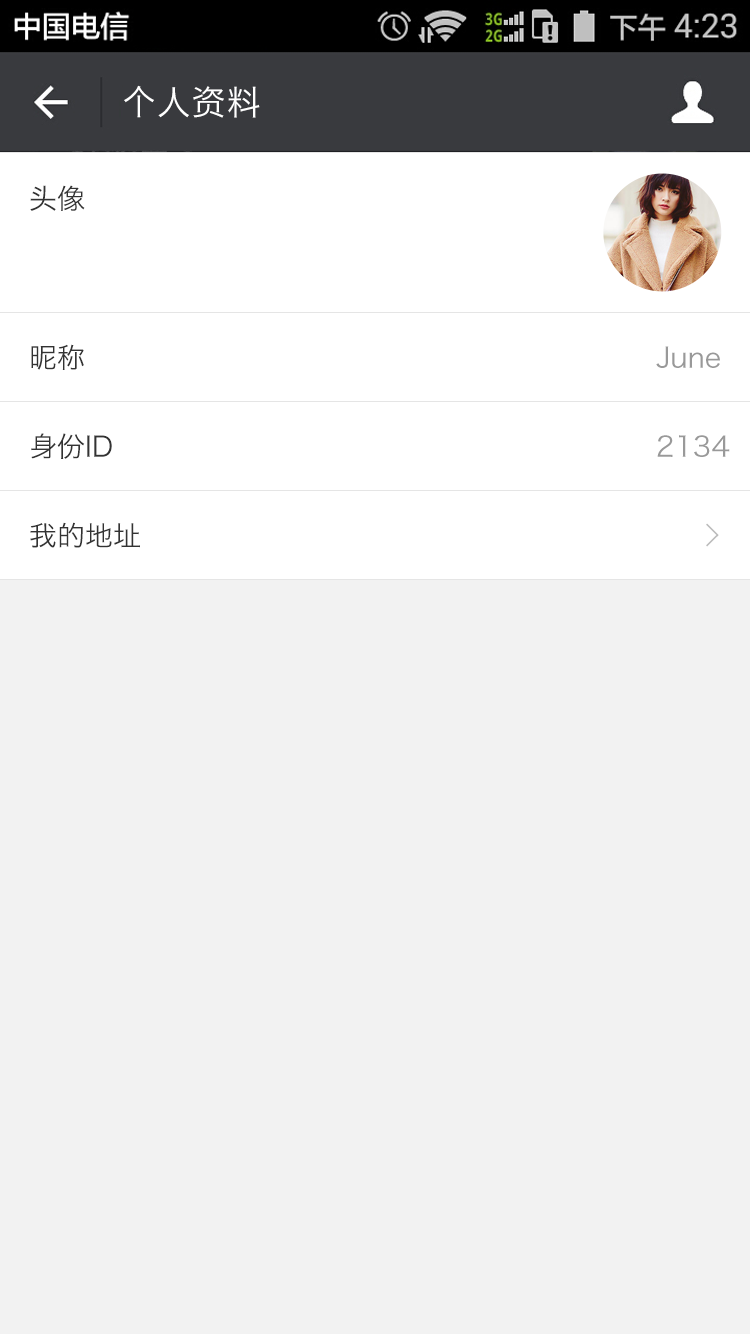
<style>
.page{position:relative;width:750px;height:1334px;background:#f2f2f2}
.page>*{position:absolute;margin:0}
.t1{font:34px "HiraginoSansGB-W3";letter-spacing:0.022em;color:#ffffff}
.t2{font:28px "HiraginoSansGB-W3";color:#333333}
.t3{font:28px "HiraginoSansGB-W3";color:#999999}
.t4{font:32px "SimSun";color:#bbbbbb;font-weight:bold}
</style>
<div class="page">
<p class="t1" style="left:124px;top:85px;width:136px;height:33px">个人资料</p>
<p class="t2" style="left:30px;top:185px;width:55px;height:26px">头像</p>
<p class="t2" style="left:31px;top:344px;width:53px;height:26px">昵称</p>
<p class="t3" style="left:656px;top:346px;width:64px;height:22px">June</p>
<p class="t2" style="left:31px;top:433px;width:81px;height:26px">身份ID</p>
<p class="t3" style="left:657px;top:435px;width:73px;height:22px">2134</p>
<p class="t2" style="left:30px;top:522px;width:110px;height:26px">我的地址</p>
<p class="t4" style="left:706px;top:523px;width:13px;height:24px">&gt;</p>
</div>
